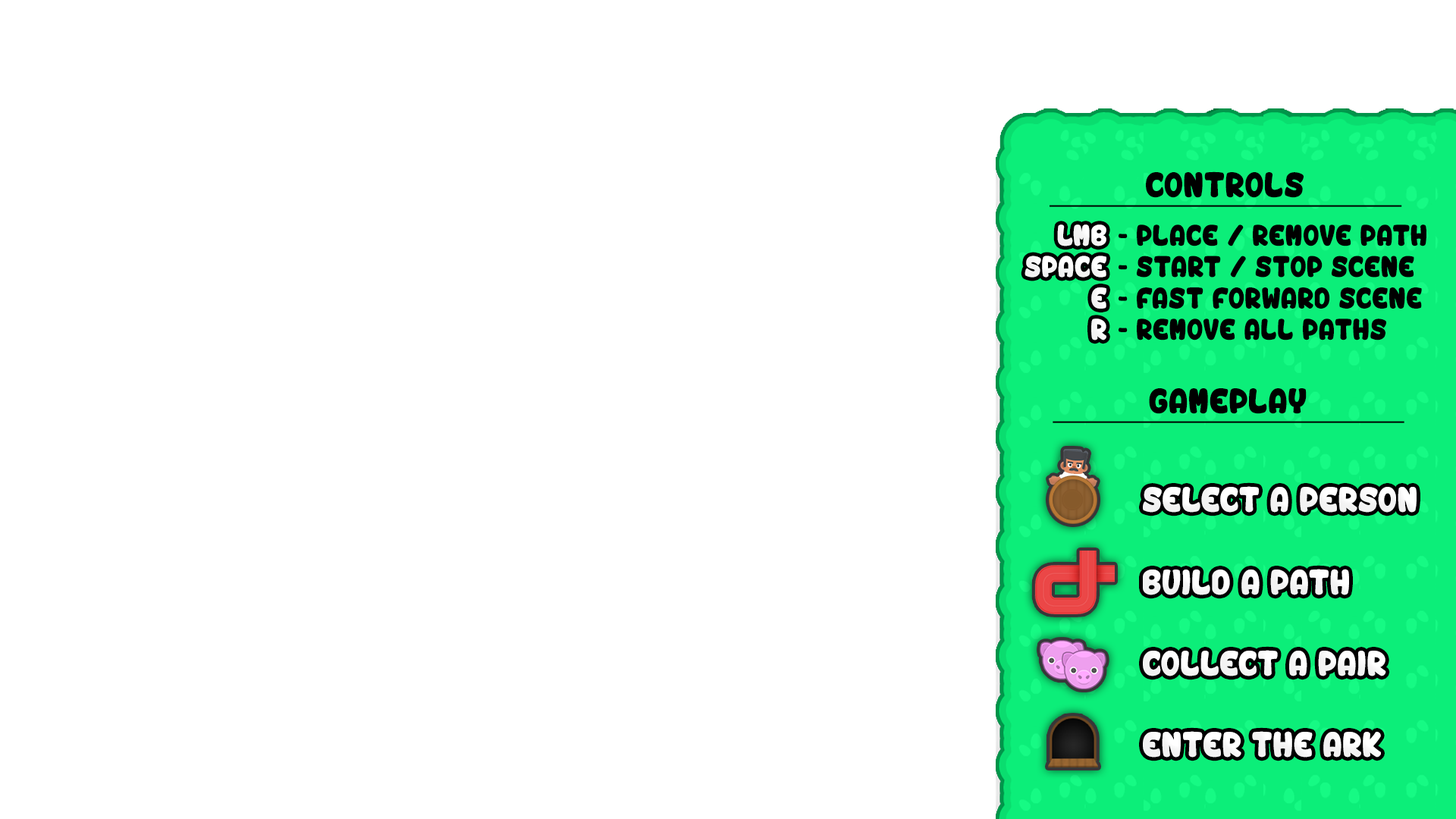
<style>
.page{position:relative;width:1456px;height:819px;background:#ffffff}
.page>*{position:absolute;margin:0}
.t1{font:36px "VinegarStroke";color:#000000;text-decoration:underline}
.t2{font:30.3px/31.4px "VinegarStroke";color:#ffffff}
.t3{font:30.3px/40.5px "VinegarStroke";color:#ffffff}
.t4{font:30.3px/31.4px "VinegarStroke";color:#000000}
.t5{font:30.3px/40.5px "VinegarStroke";color:#000000}
.t6{font:36px "VinegarStroke";color:#ffffff}
</style>
<div class="page">
<p class="t1" style="left:1050px;top:171px;width:352px;height:36px">controls</p>
<p class="t2" style="left:1024px;top:224px;width:82px;height:116px;text-align:right"><span class="t3">LMB<br></span>space<br>e<br>r</p>
<p class="t4" style="left:1119px;top:224px;width:308px;height:116px"><span class="t5">- Place / remove path<br></span>- start / stop scene<br>- fast forward scene<br>- remove all paths</p>
<p class="t1" style="left:1053px;top:388px;width:351px;height:35px">gameplay</p>
<p class="t6" style="left:1143px;top:486px;width:274px;height:27px">select a person</p>
<p class="t6" style="left:1143px;top:569px;width:206px;height:26px">build a path</p>
<p class="t6" style="left:1143px;top:650px;width:243px;height:26px">collect a pair</p>
<p class="t6" style="left:1143px;top:731px;width:238px;height:27px">enter the ark</p>
</div>
